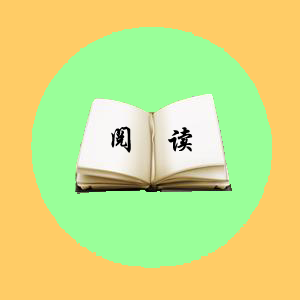
<style>
.page{position:relative;width:300px;height:300px;background:#ffcc66}
.page>*{position:absolute;margin:0}
.t1{font:30px "STXingkai";letter-spacing:0.06em;color:#000000}
</style>
<div class="page">
<p class="t1" style="left:111px;top:126px;width:82px;height:27px">阅   读</p>
</div>
